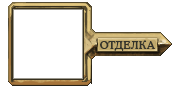
<style>
.page{position:relative;width:192px;height:88px;background:#ffffff}
.page>*{position:absolute;margin:0}
.t1{font:10.6px "CooperMediumCBT";letter-spacing:0.04em;color:#33332a;text-transform:uppercase}
</style>
<div class="page">
<p class="t1" style="left:100px;top:40px;width:56px;height:11px">отделка</p>
</div>
